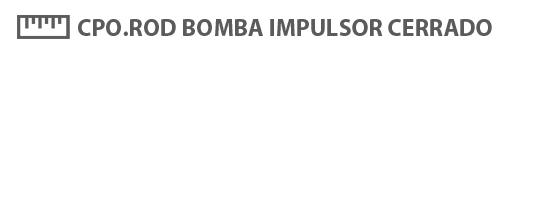
<style>
.page{position:relative;width:549px;height:200px;background:#ffffff}
.page>*{position:absolute;margin:0}
.t1{font:24px "MyriadPro-Bold";color:#5b5b5b}
</style>
<div class="page">
<p class="t1" style="left:78px;top:19px;width:414px;height:17px">CPO.ROD BOMBA IMPULSOR CERRADO</p>
</div>
